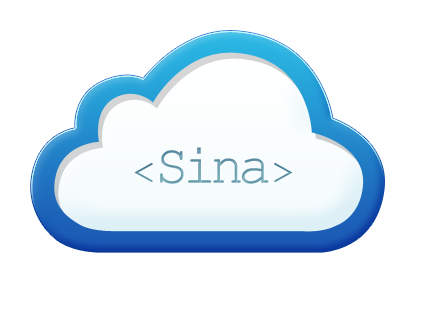
<style>
.page{position:relative;width:431px;height:316px;background:#ffffff}
.page>*{position:absolute;margin:0}
.t1{font:55.3px "CourierNewPSMT";letter-spacing:-0.1em;color:#699bac}
.t2{font:37.3px "CourierNewPSMT";letter-spacing:0.02em;color:#578a9e}
</style>
<div class="page">
<p class="t1" style="left:160px;top:147px;width:109px;height:37px">Sina</p>
<p class="t2" style="left:134px;top:163px;width:159px;height:19px">&lt;     &gt;</p>
</div>
